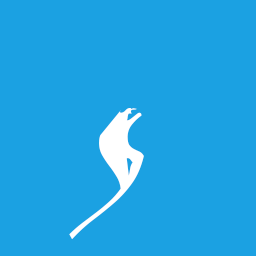
<style>
.page{position:relative;width:256px;height:256px;background:#1ba1e2}
.page>*{position:absolute;margin:0}
.t1{font:300px "MKristall";color:#ffffff}
</style>
<div class="page">
<p class="t1" style="left:69px;top:108px;width:75px;height:132px">s</p>
</div>
